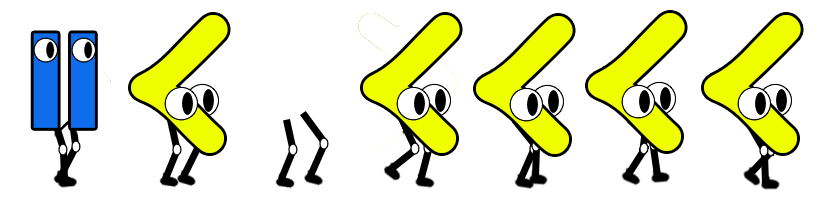
<style>
.page{position:relative;width:820px;height:200px;background:#ffffff}
.page>*{position:absolute;margin:0}
.t1{font:325px "ComicSansMS";color:#f0ff00}
.t2{font:200px "Impact";color:#0f6cea}
</style>
<div class="page">
<p class="t1" style="left:131px;top:14px;width:97px;height:139px">&lt;</p>
<p class="t2" style="left:33px;top:33px;width:62px;height:95px;rotate:-90deg">=</p>
</div>
